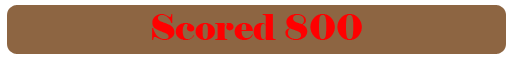
<style>
.page{position:relative;width:512px;height:60px;background:#8d6542}
.page>*{position:absolute;margin:0}
.t1{font:36px "Elephant-Regular";color:#ff0000}
</style>
<div class="page">
<p class="t1" style="left:152px;top:14px;width:210px;height:26px">Scored 800</p>
</div>
